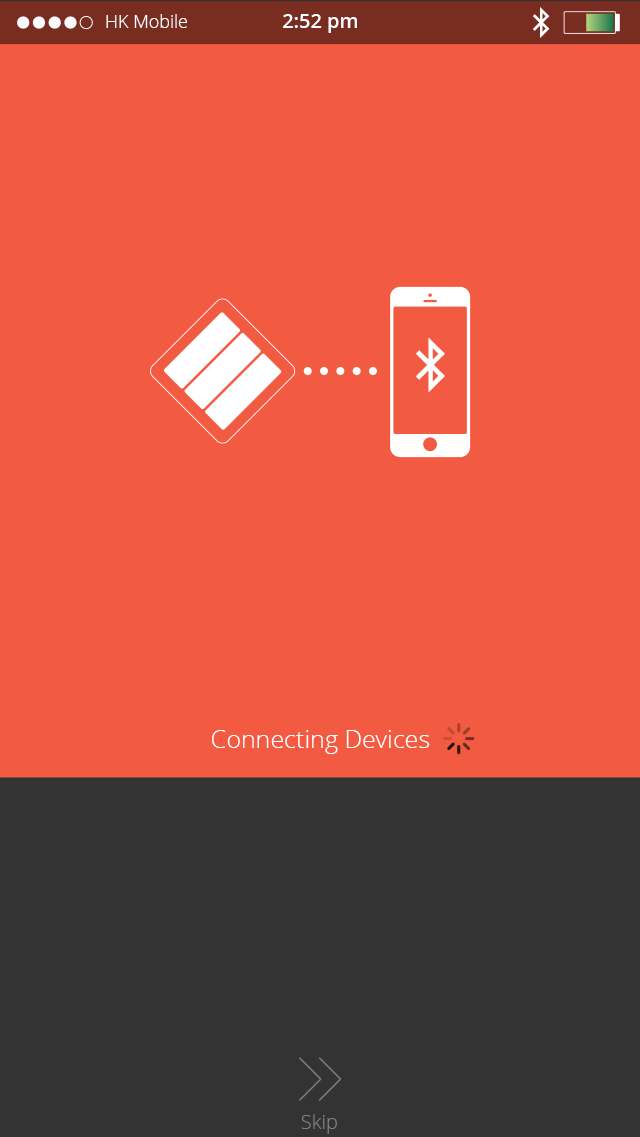
<style>
.page{position:relative;width:640px;height:1137px;background:#f25b42}
.page>*{position:absolute;margin:0}
.t1{font:18px "OpenSans-Light";color:#ffffff}
.t2{font:20px "OpenSans-Semibold";color:#ffffff}
.t3{font:25px "OpenSans-Light";color:#ffffff}
.t4{font:20px "OpenSans-Light";color:#808080}
</style>
<div class="page">
<p class="t1" style="left:106px;top:14px;width:81px;height:14px">HK Mobile</p>
<p class="t2" style="left:283px;top:14px;width:74px;height:19px">2:52 pm</p>
<p class="t3" style="left:212px;top:730px;width:218px;height:24px">Connecting Devices</p>
<p class="t4" style="left:301px;top:1114px;width:36px;height:20px">Skip</p>
</div>
